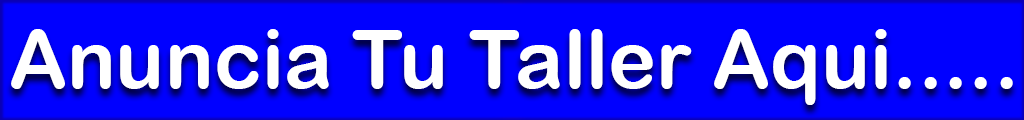
<style>
.page{position:relative;width:1024px;height:120px;background:#0000ff}
.page>*{position:absolute;margin:0}
.t1{font:81.2px "ArialRoundedMTBold";color:#ffffff}
</style>
<div class="page">
<p class="t1" style="left:11px;top:29px;width:1002px;height:76px">Anuncia Tu Taller Aqui.....</p>
</div>
